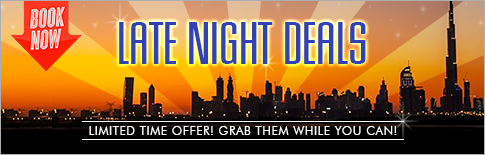
<style>
.page{position:relative;width:485px;height:155px}
.page>*{position:absolute;margin:0}
.t1{font:62.4px "HouseGothicLightOne";color:#3242b5;text-transform:uppercase}
.t2{font:12px "FuturaBT-Book";letter-spacing:0.05em;color:#ffffff;text-transform:uppercase}
</style>
<div class="page">
<p class="t1" style="left:119px;top:22px;width:247px;height:42px">Late Night Deals</p>
<p class="t2" style="left:89px;top:126px;width:308px;height:9px">Limited Time Offer! Grab them while you can!</p>
</div>
